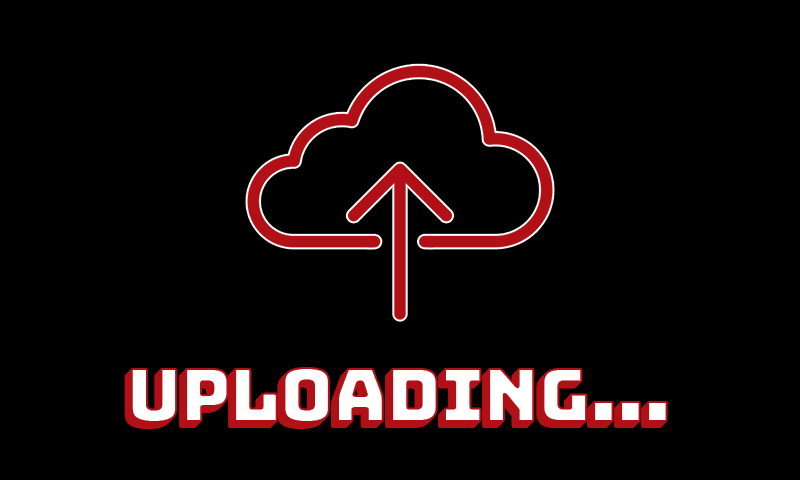
<style>
.page{position:relative;width:800px;height:480px;background:#000000}
.page>*{position:absolute;margin:0}
.t1{font:75px "Bungee-Regular";letter-spacing:-0.025em}
.t2{font:75px "Bungee-Regular";letter-spacing:-0.025em;color:#ffffff}
.t3{font:75px "Bungee-Regular";letter-spacing:-0.025em;color:#fefefe}
</style>
<div class="page">
<p class="t1" style="left:124px;top:373px;width:538px;height:56px">Uploading...</p>
<p class="t1" style="left:125px;top:372px;width:538px;height:56px">Uploading...</p>
<p class="t1" style="left:126px;top:371px;width:538px;height:56px">Uploading...</p>
<p class="t1" style="left:127px;top:370px;width:538px;height:56px">Uploading...</p>
<p class="t2" style="left:128px;top:369px;width:538px;height:56px">Uploading...</p>
<p class="t2" style="left:129px;top:368px;width:538px;height:56px">Uploading...</p>
<p class="t3" style="left:130px;top:367px;width:538px;height:56px">Uploading...</p>
</div>
